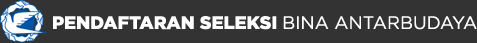
<style>
.page{position:relative;width:477px;height:43px;background:#333333}
.page>*{position:absolute;margin:0}
.t1{font:18px "Gotham-Black";color:#ffffff}
.t2{font:18px "Gotham-Book";color:#ffffff}
</style>
<div class="page">
<p class="t1" style="left:53px;top:16px;width:424px;height:14px">PENDAFTARAN SELEKSI <span class="t2">BINA ANTARBUDAYA</span></p>
</div>
